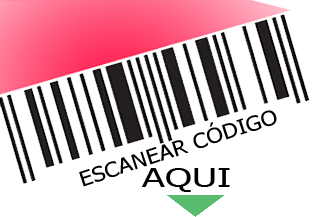
<style>
.page{position:relative;width:329px;height:217px;background:#ffffff}
.page>*{position:absolute;margin:0}
.t1{font:20.4px "Tahoma";color:#000000;scale:1.15 1}
.t2{font:24.9px "Tahoma";color:#000000;scale:1.53 1}
</style>
<div class="page">
<p class="t1" style="left:79px;top:110px;width:198px;height:77px;rotate:-18deg">ESCANEAR CÓDIGO</p>
<p class="t2" style="left:142px;top:168px;width:88px;height:24px">AQUI</p>
</div>
